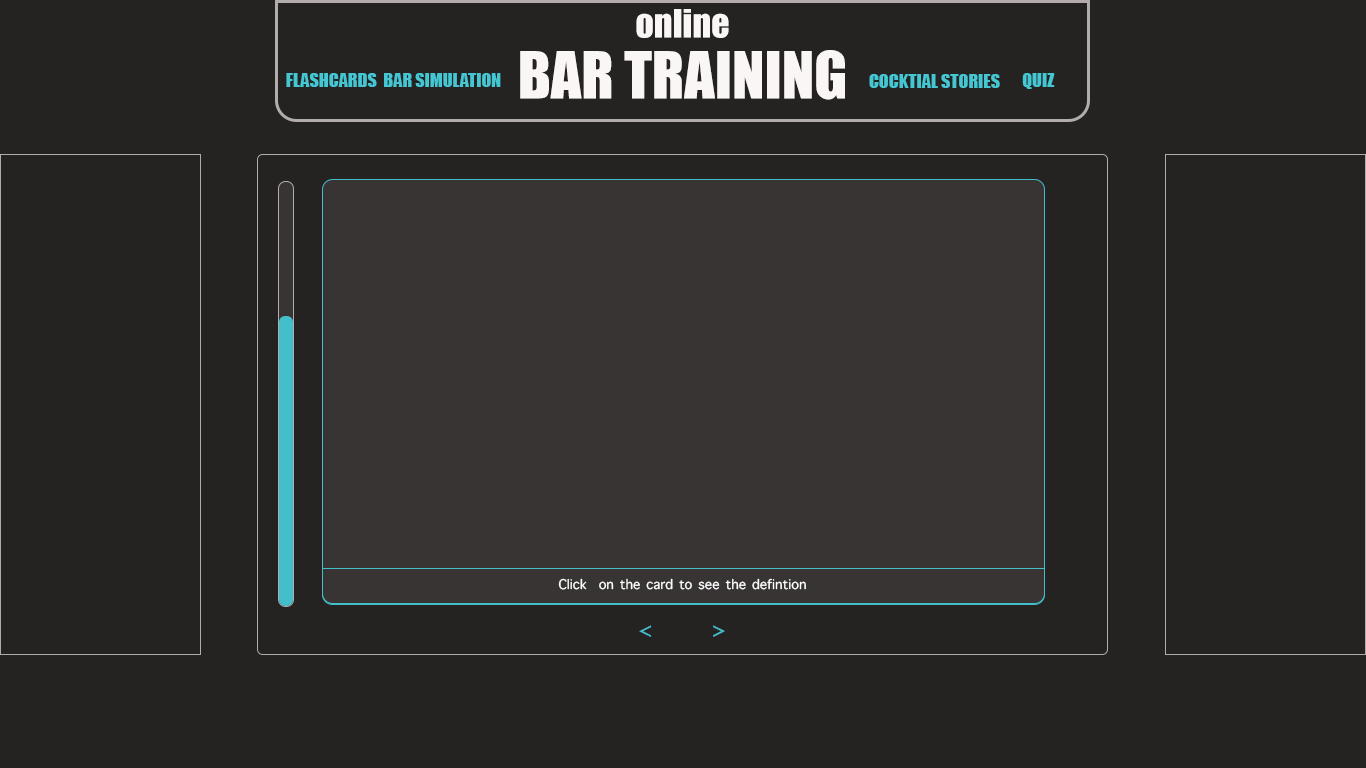
<style>
.page{position:relative;width:1366px;height:768px;background:#252222}
.page>*{position:absolute;margin:0}
.t1{font:36px "Impact";color:#fbf6f6}
.t2{font:60px "Impact";color:#fbf6f6}
.t3{font:18px "Impact";color:#44c7d3}
.t4{font:18px "AppleSymbols";color:#ffffff}
.t5{font:30px "AppleSymbols";color:#42bfcb}
</style>
<div class="page">
<p class="t1" style="left:636px;top:9px;width:93px;height:29px">online</p>
<p class="t2" style="left:520px;top:50px;width:325px;height:50px">BAR TRAINING</p>
<p class="t3" style="left:286px;top:73px;width:91px;height:14px">FLASHCARDS</p>
<p class="t3" style="left:384px;top:73px;width:117px;height:14px">BAR SIMULATION</p>
<p class="t3" style="left:869px;top:74px;width:131px;height:14px">COCKTIAL STORIES</p>
<p class="t3" style="left:1022px;top:73px;width:33px;height:16px">QUIZ</p>
<p class="t4" style="left:558px;top:578px;width:248px;height:12px">Click  on the card to see the defintion</p>
<p class="t5" style="left:639px;top:625px;width:86px;height:12px">&lt;      &gt;</p>
</div>
